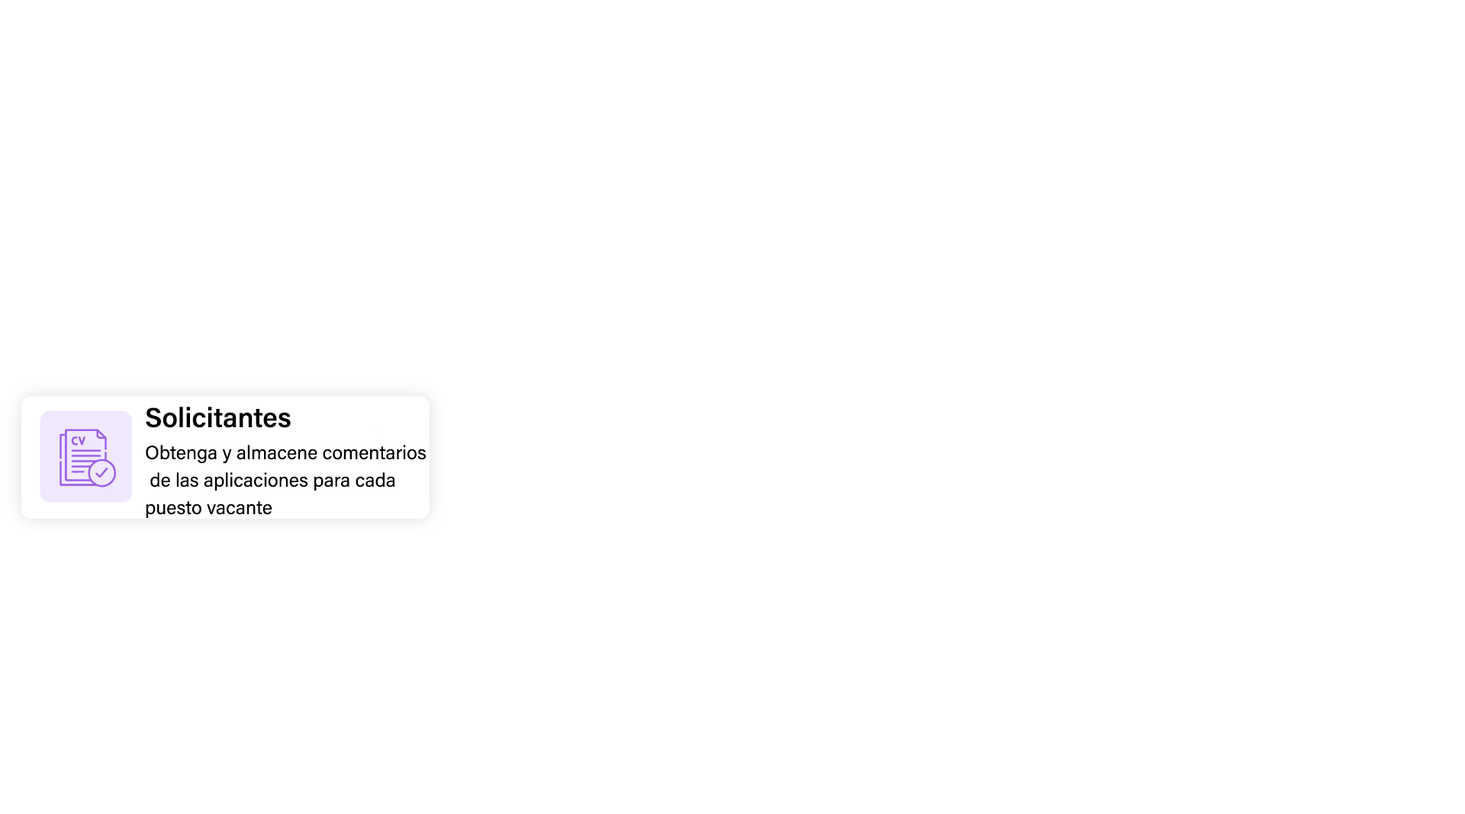
<style>
.page{position:relative;width:1465px;height:814px;background:#ffffff}
.page>*{position:absolute;margin:0}
.t1{font:27.5px "AcuminConcept_578.000wght";color:#000000}
.t2{font:19.1px/13.7px "AcuminConcept-Regular";color:#000000}
</style>
<div class="page">
<p class="t1" style="left:146px;top:407px;width:145px;height:21px">Solicitantes</p>
<p class="t2" style="left:146px;top:445px;width:280px;height:73px">Obtenga y almacene comentarios<br><br> de las aplicaciones para cada <br><br>puesto vacante</p>
</div>
